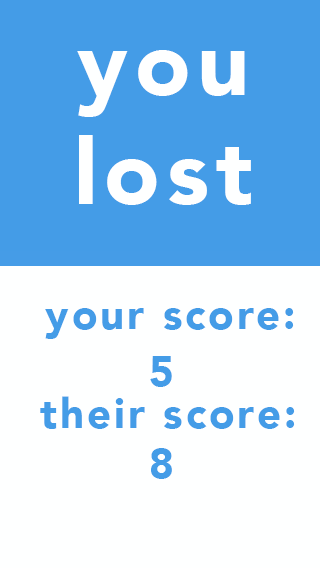
<style>
.page{position:relative;width:320px;height:568px;background:#feffff}
.page>*{position:absolute;margin:0}
.t1{font:91px "Avenir-Black";letter-spacing:0.075em;color:#feffff}
.t2{font:41.7px "Avenir-Black";letter-spacing:0.075em;color:#449ce7}
</style>
<div class="page">
<p class="t1" style="left:77px;top:50px;width:174px;height:155px;text-align:center">you<br>lost</p>
<p class="t2" style="left:45px;top:308px;width:249px;height:31px">your score:</p>
<p class="t2" style="left:150px;top:356px;width:22px;height:31px">5</p>
<p class="t2" style="left:40px;top:396px;width:255px;height:33px">their score:</p>
<p class="t2" style="left:151px;top:448px;width:21px;height:31px">8</p>
</div>
